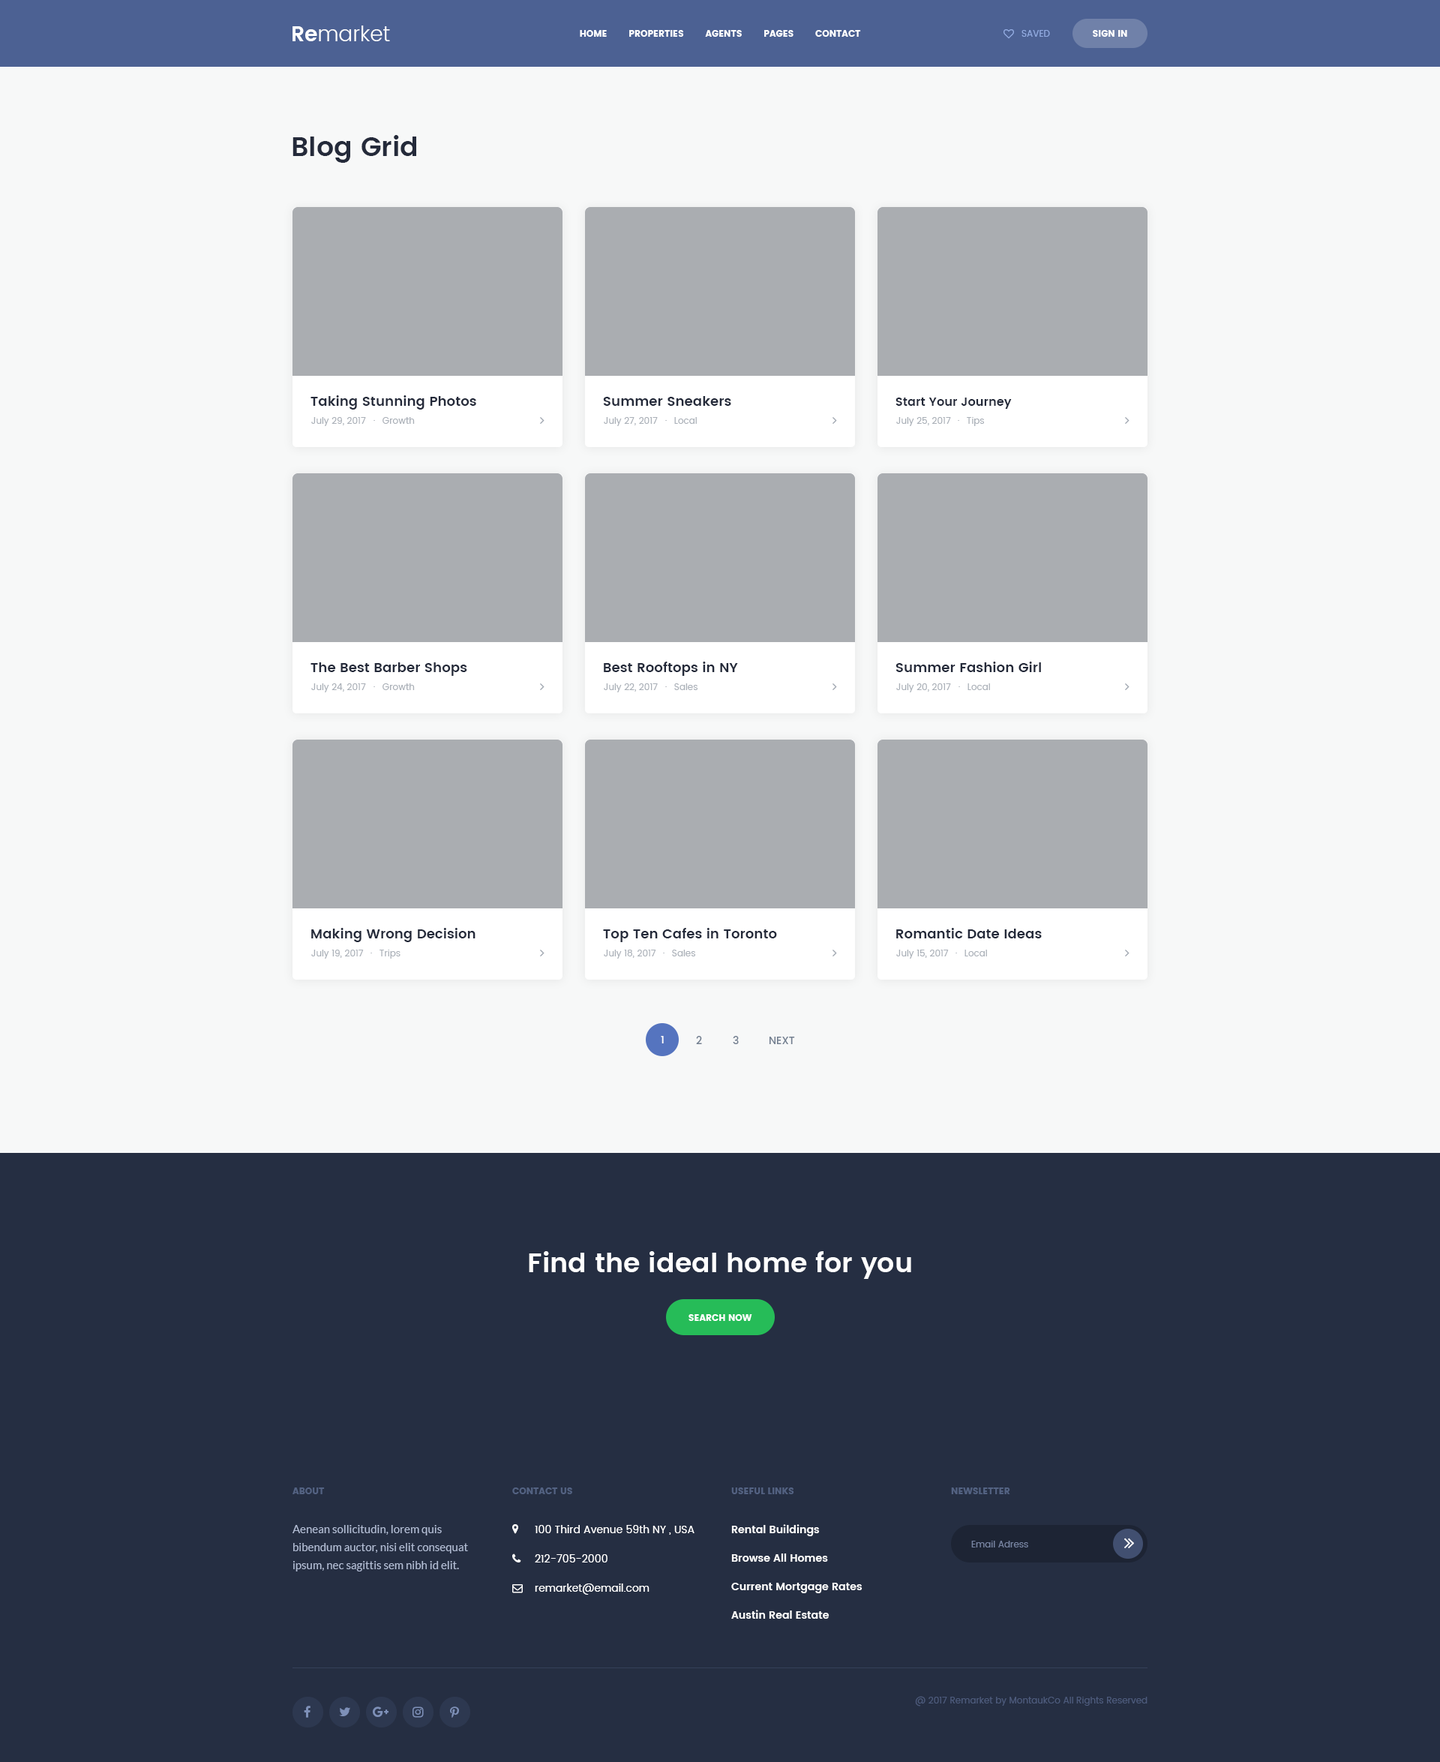
<style>
.page{position:relative;width:1440px;height:1762px;background:#f7f8f8}
.page>*{position:absolute;margin:0}
.t1{font:21px "Poppins-Light";color:#ffffff}
.t2{font:21px "Poppins-SemiBold";color:#ffffff}
.t3{font:9px "Poppins";color:#ffffff;text-transform:uppercase}
.t4{font:9px "Poppins-Regular";color:#93ace2;text-transform:uppercase}
.t5{font:27px "Poppins-SemiBold";color:#242a3a}
.t6{font:13.5px "Poppins-SemiBold";color:#242a3a}
.t7{font:12px "Poppins-SemiBold";color:#242a3a}
.t8{font:9px "Poppins-Regular";color:#aab0b8}
.t9{font:6px "Poppins-SemiBold";color:#aab0b8}
.t10{font:10.5px "Poppins-Medium";color:#ffffff}
.t11{font:10.5px "Poppins-Medium";color:#727f90}
.t12{font:10.5px "Poppins-Medium";color:#727f90;text-transform:uppercase}
.t13{font:27px "Poppins-SemiBold";color:#ffffff}
.t14{font:9px "Poppins";color:#536282;text-transform:uppercase}
.t15{font:11.2px/18px "Lato-Regular";color:#b2bdd5}
.t16{font:10.5px "Poppins-Regular";color:#ffffff}
.t17{font:10.5px/28.5px "Poppins-SemiBold";color:#ffffff}
.t18{font:9px "Poppins-Regular";color:#7784a2}
.t19{font:9px "Poppins-Regular";color:#4d5b7c}
</style>
<div class="page">
<p class="t1" style="left:292px;top:26px;width:98px;height:15px"><span class="t2">Re</span>market</p>
<p class="t3" style="left:580px;top:30px;width:281px;height:7px">Home        Properties        Agents        Pages        Contact</p>
<p class="t4" style="left:1022px;top:30px;width:28px;height:7px">Saved</p>
<p class="t3" style="left:1093px;top:30px;width:34px;height:7px">Sign In</p>
<p class="t5" style="left:292px;top:135px;width:124px;height:28px">Blog Grid</p>
<p class="t6" style="left:310px;top:395px;width:166px;height:15px">Taking Stunning Photos</p>
<p class="t6" style="left:603px;top:396px;width:128px;height:10px">Summer Sneakers</p>
<p class="t7" style="left:896px;top:398px;width:116px;height:11px">Start Your Journey</p>
<p class="t8" style="left:311px;top:417px;width:55px;height:9px">July 29, 2017</p>
<p class="t9" style="left:374px;top:420px;width:1px;height:1px">∙</p>
<p class="t8" style="left:382px;top:417px;width:33px;height:7px">Growth</p>
<p class="t8" style="left:604px;top:417px;width:54px;height:9px">July 27, 2017</p>
<p class="t9" style="left:665px;top:420px;width:2px;height:1px">∙</p>
<p class="t8" style="left:674px;top:417px;width:23px;height:7px">Local</p>
<p class="t8" style="left:896px;top:417px;width:55px;height:9px">July 25, 2017</p>
<p class="t9" style="left:958px;top:420px;width:1px;height:1px">∙</p>
<p class="t8" style="left:967px;top:417px;width:17px;height:9px">Tips</p>
<p class="t6" style="left:310px;top:662px;width:157px;height:14px">The Best Barber Shops</p>
<p class="t6" style="left:604px;top:662px;width:134px;height:14px">Best Rooftops in NY</p>
<p class="t6" style="left:896px;top:662px;width:145px;height:10px">Summer Fashion Girl</p>
<p class="t8" style="left:311px;top:683px;width:55px;height:9px">July 24, 2017</p>
<p class="t9" style="left:374px;top:686px;width:1px;height:1px">∙</p>
<p class="t8" style="left:382px;top:683px;width:33px;height:7px">Growth</p>
<p class="t8" style="left:604px;top:683px;width:54px;height:9px">July 22, 2017</p>
<p class="t9" style="left:665px;top:686px;width:2px;height:1px">∙</p>
<p class="t8" style="left:674px;top:683px;width:24px;height:7px">Sales</p>
<p class="t8" style="left:896px;top:683px;width:55px;height:9px">July 20, 2017</p>
<p class="t9" style="left:958px;top:686px;width:2px;height:1px">∙</p>
<p class="t8" style="left:968px;top:683px;width:22px;height:7px">Local</p>
<p class="t6" style="left:311px;top:928px;width:165px;height:14px">Making Wrong Decision</p>
<p class="t6" style="left:603px;top:928px;width:174px;height:14px">Top Ten Cafes in Toronto</p>
<p class="t6" style="left:896px;top:928px;width:146px;height:10px">Romantic Date Ideas</p>
<p class="t8" style="left:311px;top:950px;width:53px;height:8px">July 19, 2017</p>
<p class="t9" style="left:370px;top:952px;width:2px;height:1px">∙</p>
<p class="t8" style="left:380px;top:950px;width:20px;height:8px">Trips</p>
<p class="t8" style="left:604px;top:950px;width:52px;height:8px">July 18, 2017</p>
<p class="t9" style="left:663px;top:952px;width:1px;height:1px">∙</p>
<p class="t8" style="left:672px;top:950px;width:23px;height:6px">Sales</p>
<p class="t8" style="left:896px;top:950px;width:53px;height:8px">July 15, 2017</p>
<p class="t9" style="left:956px;top:952px;width:1px;height:1px">∙</p>
<p class="t8" style="left:964px;top:950px;width:23px;height:6px">Local</p>
<p class="t10" style="left:661px;top:1036px;width:3px;height:7px">1</p>
<p class="t11" style="left:696px;top:1036px;width:6px;height:8px">2</p>
<p class="t11" style="left:733px;top:1036px;width:6px;height:8px">3</p>
<p class="t12" style="left:769px;top:1036px;width:26px;height:8px">Next</p>
<p class="t13" style="left:529px;top:1251px;width:382px;height:28px">Find the ideal home for you</p>
<p class="t3" style="left:688px;top:1314px;width:64px;height:7px">Search Now</p>
<p class="t14" style="left:292px;top:1487px;width:33px;height:7px">About</p>
<p class="t14" style="left:512px;top:1487px;width:60px;height:7px">Contact Us</p>
<p class="t14" style="left:731px;top:1487px;width:63px;height:7px">Useful Links</p>
<p class="t14" style="left:951px;top:1487px;width:59px;height:7px">Newsletter</p>
<p class="t15" style="left:292px;top:1525px;width:176px;height:46px">Aenean sollicitudin, lorem quis bibendum auctor, nisi elit consequat ipsum, nec sagittis sem nibh id elit.</p>
<p class="t16" style="left:535px;top:1525px;width:159px;height:9px">100 Third Avenue 59th NY , USA</p>
<p class="t17" style="left:731px;top:1524px;width:131px;height:94px">Rental Buildings<br>Browse All Homes<br>Current Mortgage Rates<br>Austin Real Estate</p>
<p class="t18" style="left:971px;top:1540px;width:57px;height:7px">Email Adress</p>
<p class="t16" style="left:535px;top:1554px;width:73px;height:8px">212-705-2000</p>
<p class="t16" style="left:535px;top:1583px;width:115px;height:11px">remarket@email.com</p>
<p class="t19" style="left:915px;top:1696px;width:233px;height:10px">@ 2017 Remarket by MontaukCo All Rights Reserved</p>
</div>
